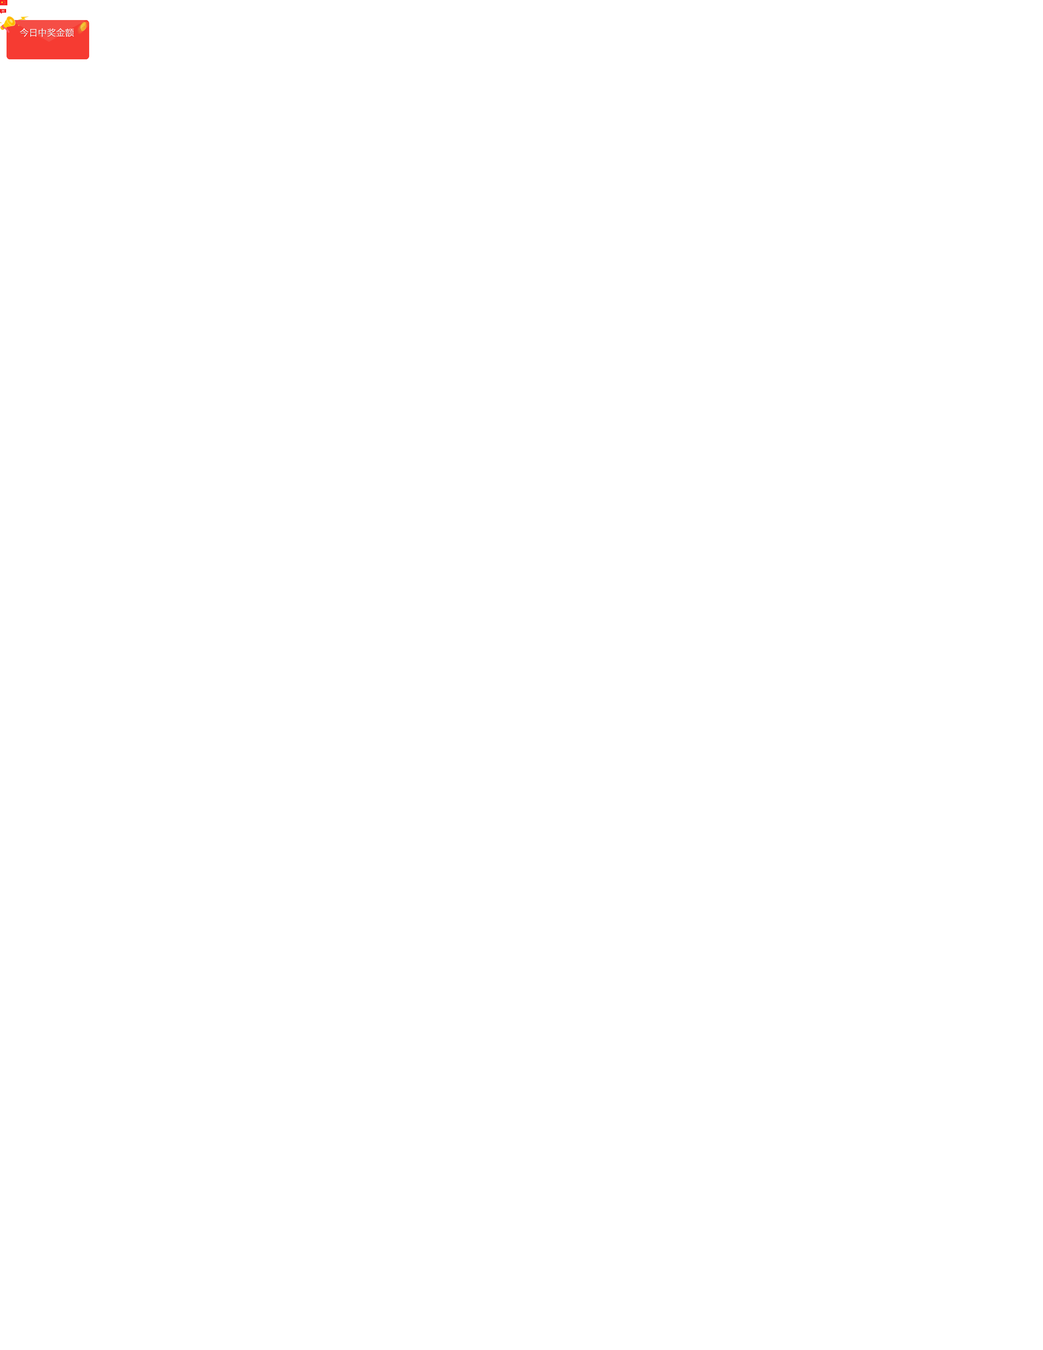
<style>
.page{position:relative;width:1043px;height:1350px;background:#ffffff}
.page>*{position:absolute;margin:0}
.t1{font:9px "HiraginoSansGB-W3";letter-spacing:0.01em;color:#ececec}
</style>
<div class="page">
<p class="t1" style="left:20px;top:28px;width:54px;height:9px">今日中奖金额</p>
</div>
